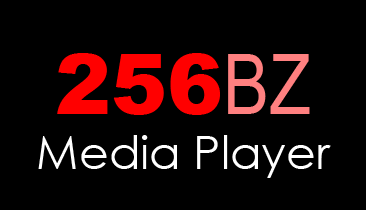
<style>
.page{position:relative;width:366px;height:210px;background:#000000}
.page>*{position:absolute;margin:0}
.t1{font:46px "CenturyGothic";color:#ffffff}
.t2{font:84px "Arial-Black";color:#ff0000}
.t3{font:84px "ArialNarrow";color:#ff8080}
</style>
<div class="page">
<p class="t1" style="left:38px;top:53px;width:293px;height:125px;text-align:center"><span class="t2">256</span><span class="t3">BZ<br></span>Media Player</p>
</div>
